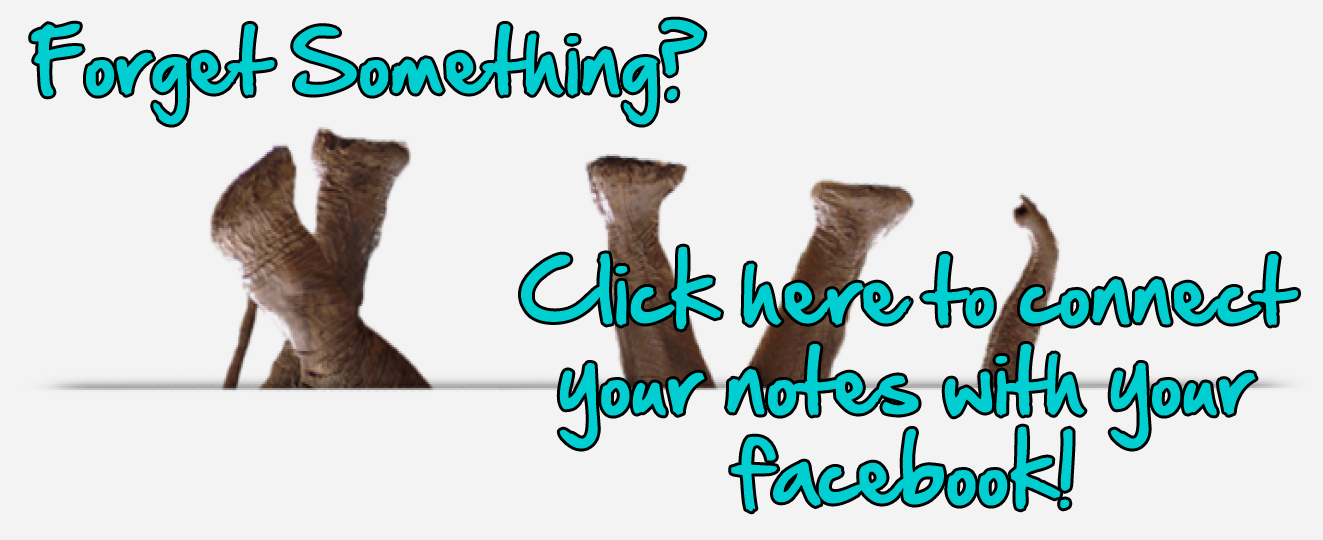
<style>
.page{position:relative;width:1323px;height:540px;background:#f3f3f3}
.page>*{position:absolute;margin:0}
.t1{font:75px "HandOfSean";color:#00ced1}
</style>
<div class="page">
<p class="t1" style="left:31px;top:19px;width:674px;height:106px">Forget Something?</p>
<p class="t1" style="left:521px;top:246px;width:777px;height:266px;text-align:center">Click here to connect your notes with your facebook!</p>
</div>
